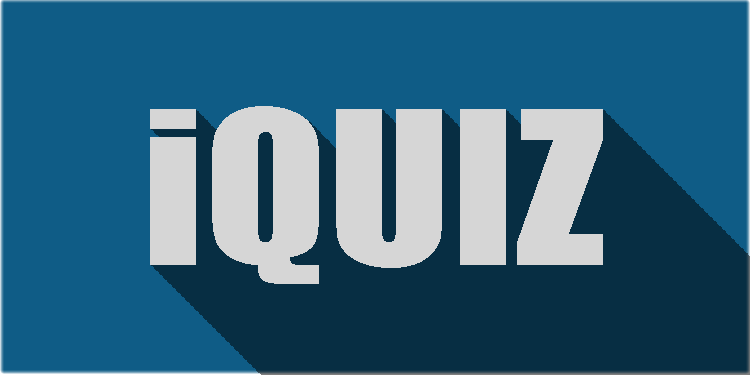
<style>
.page{position:relative;width:750px;height:375px;background:#0f5c86}
.page>*{position:absolute;margin:0}
.t1{font:197.4px "Impact";color:#d6d6d6;text-transform:uppercase;scale:1.15 1}
.t2{font:197.4px "Impact";color:#d6d6d6;scale:1.15 1}
</style>
<div class="page">
<p class="t1" style="left:150px;top:106px;width:453px;height:178px"><span class="t2">i</span>QUIZ</p>
</div>
